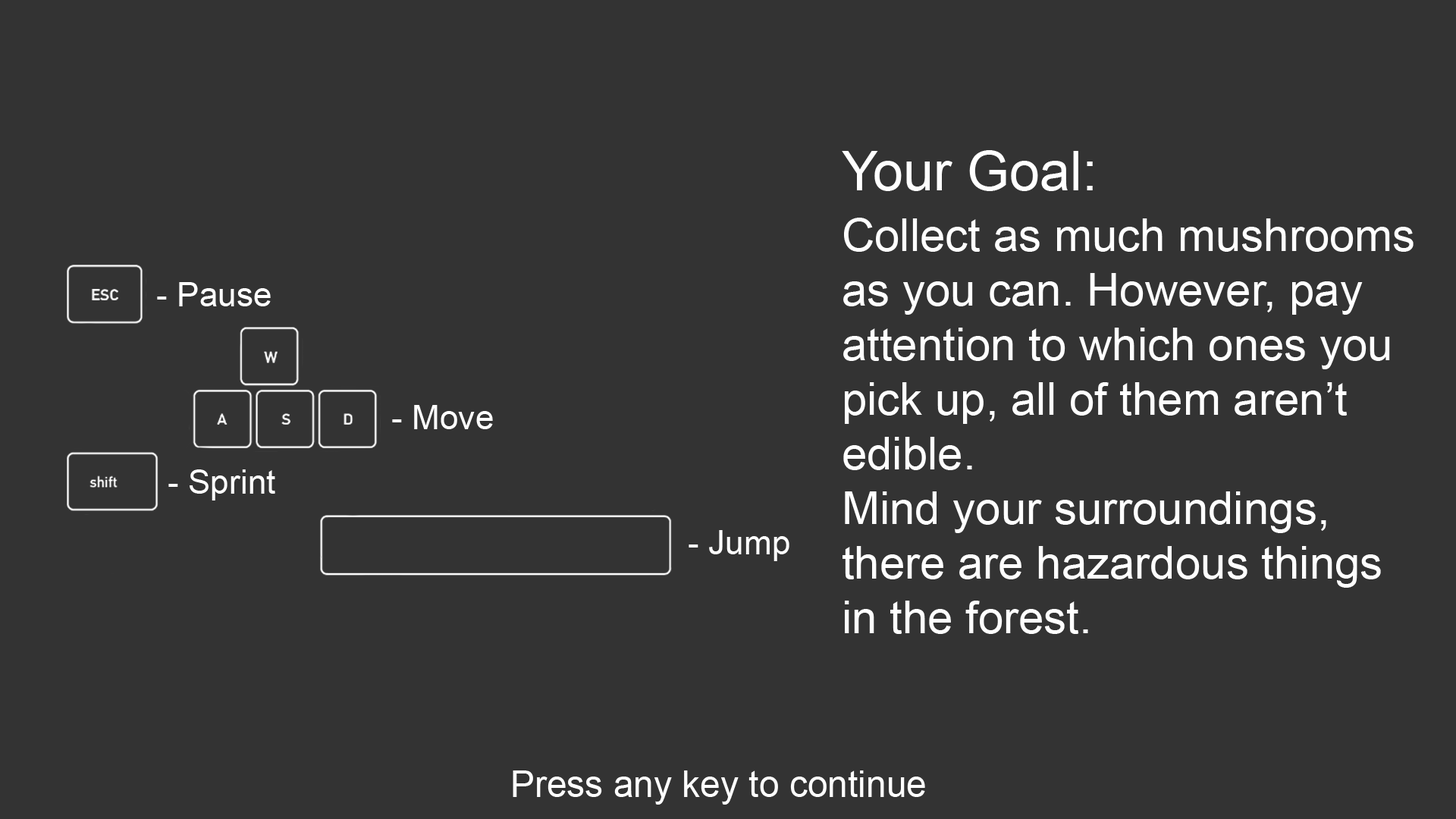
<style>
.page{position:relative;width:1456px;height:819px;background:#333333}
.page>*{position:absolute;margin:0}
.t1{font:54.6px "ArialMT";color:#ffffff}
.t2{font:45.5px "ArialMT";color:#ffffff}
.t3{font:33.7px "ArialMT";color:#ffffff}
.t4{font:36.4px "ArialMT";color:#ffffff}
</style>
<div class="page">
<p class="t1" style="left:842px;top:150px;width:251px;height:41px">Your Goal:</p>
<p class="t2" style="left:842px;top:218px;width:572px;height:416px">Collect as much mushrooms<br>as you can. However, pay<br>attention to which ones you <br>pick up, all of them aren’t<br>edible.<br>Mind your surroundings,<br>there are hazardous things<br>in the forest.</p>
<p class="t3" style="left:157px;top:282px;width:114px;height:24px">- Pause</p>
<p class="t3" style="left:392px;top:405px;width:101px;height:24px">- Move</p>
<p class="t3" style="left:168px;top:469px;width:107px;height:31px">- Sprint</p>
<p class="t3" style="left:689px;top:530px;width:100px;height:31px">- Jump</p>
<p class="t4" style="left:513px;top:770px;width:412px;height:35px">Press any key to continue</p>
</div>
